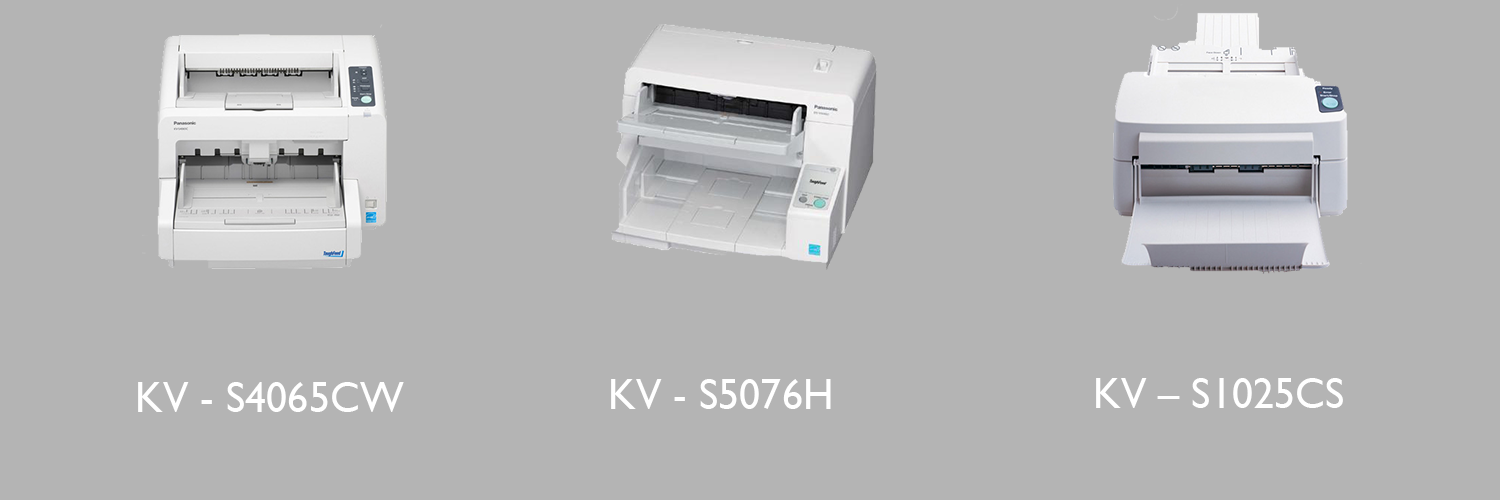
<style>
.page{position:relative;width:1500px;height:500px;background:#b4b4b4}
.page>*{position:absolute;margin:0}
.t1{font:42.7px "GillSansMT";color:#ffffff}
</style>
<div class="page">
<p class="t1" style="left:138px;top:382px;width:266px;height:30px">KV - S4065CW</p>
<p class="t1" style="left:611px;top:379px;width:220px;height:30px">KV - S5076H</p>
<p class="t1" style="left:1096px;top:378px;width:247px;height:30px">KV – S1025CS</p>
</div>
